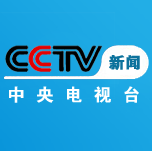
<style>
.page{position:relative;width:152px;height:151px}
.page>*{position:absolute;margin:0}
.t1{font:16px "FZDHTJW--GB1-0";color:#0c729c;font-weight:bold}
.t2{font:18px "FZDHTJW--GB1-0";letter-spacing:0.6em;color:#ffffff}
</style>
<div class="page">
<p class="t1" style="left:109px;top:55px;width:31px;height:15px">新闻</p>
<p class="t2" style="left:9px;top:86px;width:130px;height:17px">中央电视台</p>
</div>
